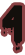
<style>
.page{position:relative;width:25px;height:55px;background:#130f0c}
.page>*{position:absolute;margin:0}
.t1{font:45.8px "CSNPWDTNFI";color:#130f0c}
</style>
<div class="page">
<p class="t1" style="left:2px;top:5px;width:21px;height:46px">4</p>
</div>
